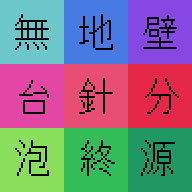
<style>
.page{position:relative;width:192px;height:192px}
.page>*{position:absolute;margin:0}
.t1{font:36px "JF-Dot-Ayu-18";color:#000000}
</style>
<div class="page">
<p class="t1" style="left:15px;top:14px;width:34px;height:36px">無</p>
<p class="t1" style="left:79px;top:14px;width:34px;height:36px">地</p>
<p class="t1" style="left:143px;top:15px;width:34px;height:34px">壁</p>
<p class="t1" style="left:79px;top:78px;width:34px;height:36px">針</p>
<p class="t1" style="left:145px;top:78px;width:34px;height:36px">分</p>
<p class="t1" style="left:19px;top:80px;width:30px;height:34px">台</p>
<p class="t1" style="left:15px;top:140px;width:34px;height:36px">泡</p>
<p class="t1" style="left:81px;top:140px;width:34px;height:36px">終</p>
<p class="t1" style="left:141px;top:140px;width:34px;height:36px">源</p>
</div>
